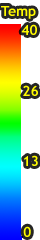
<style>
.page{position:relative;width:40px;height:240px;background:#ffffff}
.page>*{position:absolute;margin:0}
.t1{font:13.9px "TrebuchetMS-Bold";color:#fffb00}
</style>
<div class="page">
<p class="t1" style="left:1px;top:6px;width:35px;height:13px">Temp<br>wt%</p>
<p class="t1" style="left:21px;top:24px;width:16px;height:11px">40</p>
<p class="t1" style="left:23px;top:85px;width:15px;height:11px">26</p>
<p class="t1" style="left:24px;top:155px;width:14px;height:11px">13</p>
<p class="t1" style="left:23px;top:226px;width:8px;height:11px">0</p>
</div>
